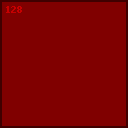
<style>
.page{position:relative;width:128px;height:128px;background:#800000}
.page>*{position:absolute;margin:0}
.t1{font:9px "Verdana-Bold";letter-spacing:-0.025em;color:#c60000;text-transform:uppercase}
</style>
<div class="page">
<p class="t1" style="left:6px;top:6px;width:16px;height:7px">128</p>
</div>
